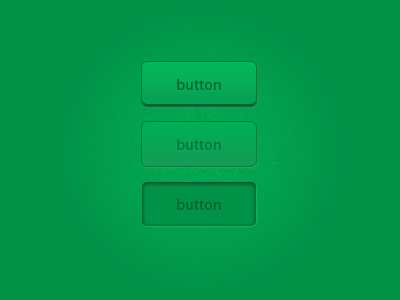
<style>
.page{position:relative;width:400px;height:300px;background:#019147}
.page>*{position:absolute;margin:0}
.t1{font:14px "LucidaSansStd";color:#016331}
.t2{font:14px "LucidaSansStd";color:#007238}
.t3{font:14px "LucidaSansStd";color:#005f2e}
</style>
<div class="page">
<p class="t1" style="left:177px;top:79px;width:44px;height:11px">button</p>
<p class="t2" style="left:177px;top:139px;width:44px;height:11px">button</p>
<p class="t3" style="left:177px;top:199px;width:44px;height:11px">button</p>
</div>
